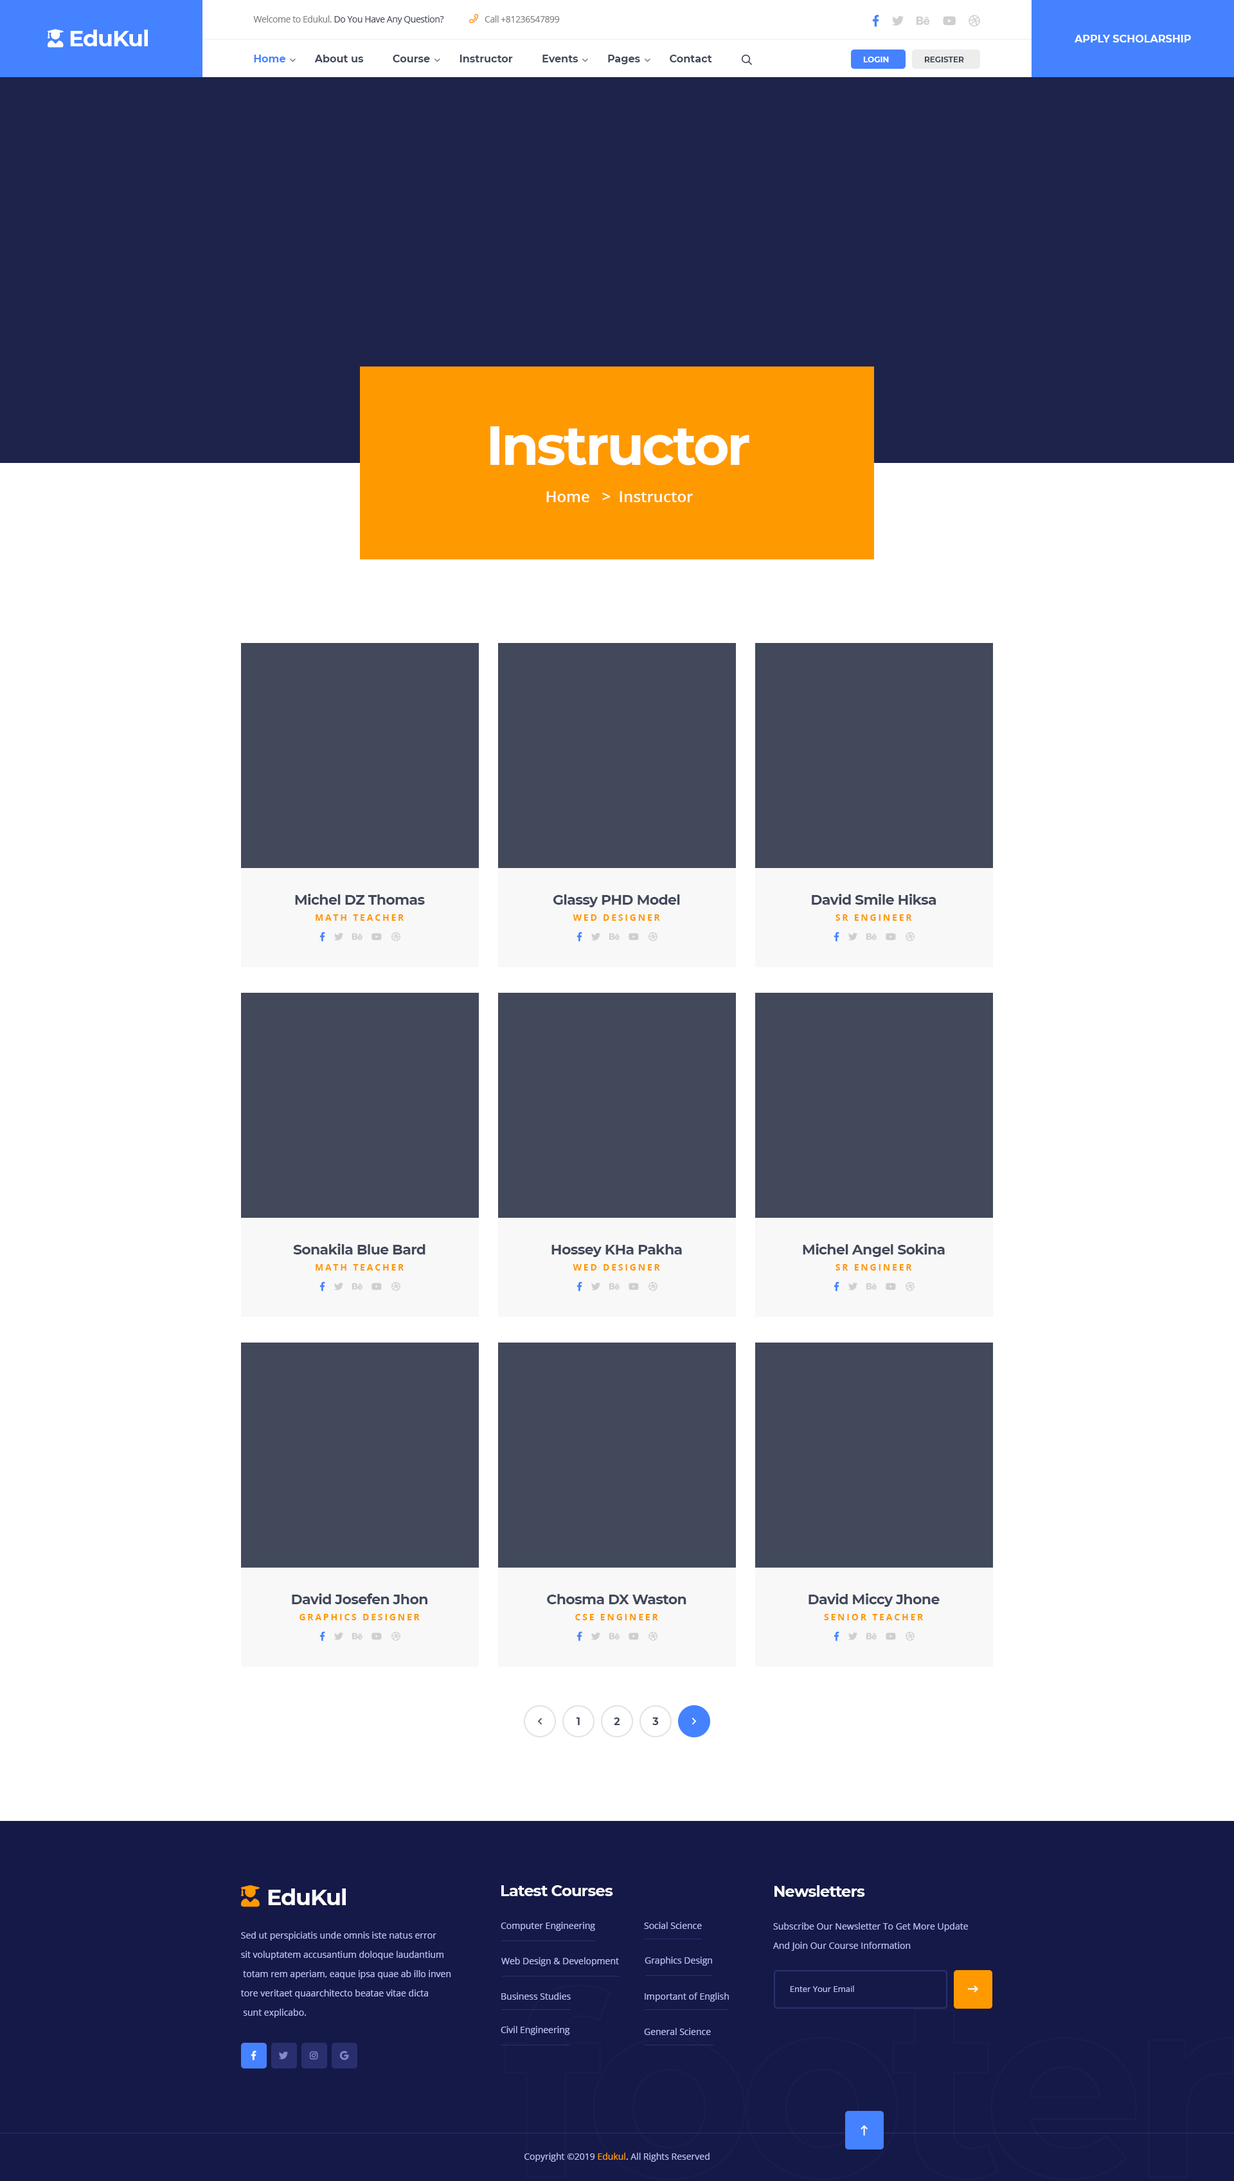
<style>
.page{position:relative;width:1234px;height:2181px;background:#ffffff}
.page>*{position:absolute;margin:0}
.t1{font:9px "OpenSans-Regular";letter-spacing:-0.03em;color:#42495b}
.t2{font:9px "OpenSans-Regular";letter-spacing:-0.03em;color:#808080}
.t3{font:22.5px "Montserrat-Bold";letter-spacing:-0.03em;color:#ffffff}
.t4{font:10.3px "Montserrat-Bold";color:#ffffff;text-transform:uppercase}
.t5{font:10.3px "Montserrat-Bold";color:#42495b}
.t6{font:10.3px "Montserrat-Bold";color:#4582ff}
.t7{font:7.7px "Montserrat-Bold";color:#ffffff;text-transform:uppercase}
.t8{font:7.7px "Montserrat-Bold";color:#42495b;text-transform:uppercase}
.t9{font:54.6px "Montserrat-Bold";letter-spacing:-0.04em;color:#ffffff}
.t10{font:15.4px "OpenSans-SemiBold";color:#ffffff}
.t11{font:14.1px "Montserrat-Bold";letter-spacing:-0.03em;color:#42495b}
.t12{font:9px "OpenSans-Bold";letter-spacing:0.2em;color:#ff9900;text-transform:uppercase}
.t13{font:10.3px "Montserrat-Bold";letter-spacing:-0.03em;color:#42495b}
.t14{font:15.4px "Montserrat-Bold";letter-spacing:-0.03em;color:#ffffff}
.t15{font:9px "OpenSans-Regular";color:#b8bdf2}
.t16{font:9px/19.3px "OpenSans-Regular";color:#b8bdf2}
.t17{font:8.4px "OpenSans-Regular";color:#b8bdf2}
.t18{font:9px "OpenSans-Regular";color:#ff9900}
.t19{font:9px "OpenSans-Regular";color:#d3cfff}
</style>
<div class="page">
<p class="t1" style="left:253px;top:15px;width:191px;height:9px"><span class="t2">Welcome to Edukul. </span>Do You Have Any Question?</p>
<p class="t2" style="left:485px;top:15px;width:75px;height:7px">Call +81236547899</p>
<p class="t3" style="left:70px;top:30px;width:78px;height:16px">EduKul</p>
<p class="t4" style="left:1074px;top:35px;width:117px;height:7px">Apply scholarship</p>
<p class="t5" style="left:254px;top:55px;width:458px;height:9px"><span class="t6">Home</span>          About us          Course          Instructor          Events          Pages          Contact</p>
<p class="t7" style="left:863px;top:57px;width:26px;height:5px">login</p>
<p class="t8" style="left:924px;top:57px;width:40px;height:5px">register</p>
<p class="t9" style="left:491px;top:426px;width:259px;height:39px">Instructor</p>
<p class="t10" style="left:546px;top:491px;width:147px;height:11px">Home   &gt;  Instructor</p>
<p class="t11" style="left:295px;top:894px;width:130px;height:11px">Michel DZ Thomas</p>
<p class="t11" style="left:812px;top:894px;width:125px;height:11px">David Smile Hiksa</p>
<p class="t11" style="left:553px;top:894px;width:127px;height:13px">Glassy PHD Model</p>
<p class="t12" style="left:316px;top:914px;width:88px;height:7px">Math Teacher</p>
<p class="t12" style="left:573px;top:914px;width:87px;height:7px">Wed designer</p>
<p class="t12" style="left:836px;top:914px;width:76px;height:7px">sr Engineer</p>
<p class="t11" style="left:293px;top:1243px;width:133px;height:11px">Sonakila Blue Bard</p>
<p class="t11" style="left:552px;top:1244px;width:130px;height:13px">Hossey KHa Pakha</p>
<p class="t11" style="left:803px;top:1243px;width:142px;height:14px">Michel Angel Sokina</p>
<p class="t12" style="left:316px;top:1264px;width:88px;height:6px">Math Teacher</p>
<p class="t12" style="left:573px;top:1264px;width:87px;height:6px">Wed designer</p>
<p class="t12" style="left:836px;top:1264px;width:76px;height:6px">sr Engineer</p>
<p class="t11" style="left:292px;top:1593px;width:136px;height:11px">David Josefen Jhon</p>
<p class="t11" style="left:547px;top:1594px;width:140px;height:10px">Chosma DX Waston</p>
<p class="t11" style="left:809px;top:1593px;width:131px;height:14px">David Miccy Jhone</p>
<p class="t12" style="left:300px;top:1614px;width:120px;height:6px">Graphics designer</p>
<p class="t12" style="left:575px;top:1614px;width:83px;height:6px">CSE Engineer</p>
<p class="t12" style="left:824px;top:1614px;width:100px;height:6px">senior teacher</p>
<p class="t13" style="left:576px;top:1717px;width:4px;height:8px">1</p>
<p class="t13" style="left:614px;top:1717px;width:6px;height:8px">2</p>
<p class="t13" style="left:652px;top:1717px;width:7px;height:8px">3</p>
<p class="t3" style="left:268px;top:1888px;width:78px;height:17px">EduKul</p>
<p class="t14" style="left:501px;top:1885px;width:112px;height:11px">Latest Courses</p>
<p class="t14" style="left:775px;top:1885px;width:90px;height:11px">Newsletters</p>
<p class="t15" style="left:501px;top:1922px;width:94px;height:9px">Computer Engineering</p>
<p class="t15" style="left:644px;top:1922px;width:58px;height:7px">Social Science</p>
<p class="t16" style="left:773px;top:1922px;width:195px;height:28px">Subscribe Our Newsletter To Get More Update<br>And Join Our Course Information</p>
<p class="t16" style="left:240px;top:1931px;width:211px;height:86px">Sed ut perspiciatis unde omnis iste natus error <br>sit voluptatem accusantium doloque laudantium<br> totam rem aperiam, eaque ipsa quae ab illo inven<br>tore veritaet quaarchitecto beatae vitae dicta<br> sunt explicabo. <br>Nemo enim ipsam voluptatem quia</p>
<p class="t15" style="left:501px;top:1957px;width:118px;height:9px">Web Design &amp; Development</p>
<p class="t15" style="left:645px;top:1956px;width:67px;height:9px">Graphics Design</p>
<p class="t17" style="left:790px;top:1985px;width:64px;height:7px">Enter Your Email</p>
<p class="t15" style="left:501px;top:1992px;width:70px;height:7px">Business Studies</p>
<p class="t15" style="left:645px;top:1992px;width:84px;height:9px">Important of English</p>
<p class="t15" style="left:501px;top:2026px;width:69px;height:9px">Civil Engineering</p>
<p class="t15" style="left:644px;top:2028px;width:67px;height:7px">General Science</p>
<p class="t15" style="left:525px;top:2152px;width:185px;height:9px">Copyright ©2019 <span class="t18">Edukul</span><span class="t19">. </span>All Rights Reserved</p>
</div>
